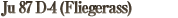
<style>
.page{position:relative;width:178px;height:18px;background:#ffffff}
.page>*{position:absolute;margin:0}
.t1{font:16px "RyuminPro-ExBold";letter-spacing:-0.08em;color:#4a3f32;font-weight:bold;scale:0.9 1}
</style>
<div class="page">
<p class="t1" style="left:1px;top:1px;width:131px;height:16px">Ju 87 D-4 (Fliegerass)</p>
</div>
